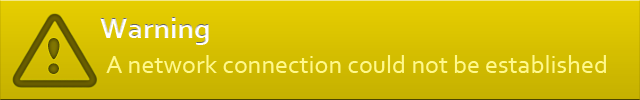
<style>
.page{position:relative;width:640px;height:100px}
.page>*{position:absolute;margin:0}
.t1{font:30px "Corbel-Bold";color:#ffffff}
.t2{font:48px "CooperBlackStd";color:#6c6301}
.t3{font:26px "Corbel";color:#fff88a}
</style>
<div class="page">
<p class="t1" style="left:100px;top:17px;width:109px;height:28px">Warning</p>
<p class="t2" style="left:48px;top:38px;width:12px;height:36px">!</p>
<p class="t3" style="left:106px;top:55px;width:500px;height:18px">A network connection could not be established</p>
</div>
